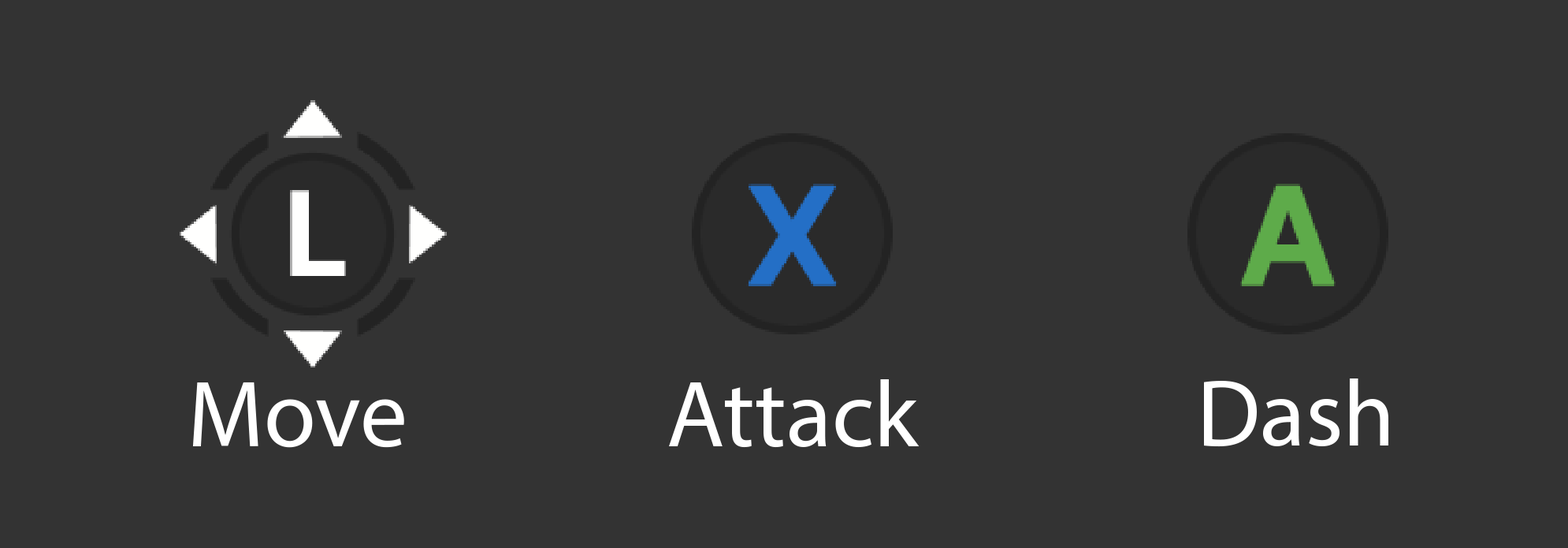
<style>
.page{position:relative;width:1568px;height:548px;background:#333333}
.page>*{position:absolute;margin:0}
.t1{font:94.6px "MyriadPro-Regular";color:#ffffff}
</style>
<div class="page">
<p class="t1" style="left:192px;top:381px;width:212px;height:67px">Move</p>
<p class="t1" style="left:669px;top:379px;width:251px;height:69px">Attack</p>
<p class="t1" style="left:1204px;top:378px;width:184px;height:69px">Dash</p>
</div>
